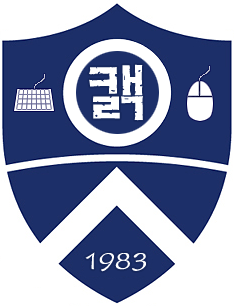
<style>
.page{position:relative;width:234px;height:306px;background:#ffffff}
.page>*{position:absolute;margin:0}
.t1{font:62.5px "H2mkpB";color:#ffffff}
.t2{font:29.2px "³­ÃÊÃ¼";color:#ffffff}
</style>
<div class="page">
<p class="t1" style="left:89px;top:64px;width:54px;height:57px">캙</p>
<p class="t2" style="left:85px;top:252px;width:61px;height:20px">1983</p>
</div>
